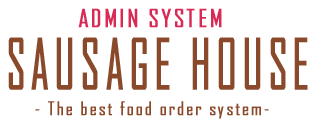
<style>
.page{position:relative;width:313px;height:130px;background:#ffffff}
.page>*{position:absolute;margin:0}
.t1{font:24px "AgencyFB-Reg";letter-spacing:0.1em;color:#d92a55;font-weight:bold}
.t2{font:67.2px "AgencyFB-Reg";letter-spacing:0.1em;color:#8a492b;font-weight:bold;scale:0.67 1}
.t3{font:18px "AgencyFB-Reg";letter-spacing:0.1em;color:#8a492b;font-weight:bold}
</style>
<div class="page">
<p class="t1" style="left:78px;top:8px;width:144px;height:20px">ADMIN SYSTEM</p>
<p class="t2" style="left:8px;top:37px;width:300px;height:53px">SAUSAGE HOUSE</p>
<p class="t3" style="left:35px;top:101px;width:234px;height:18px">- The best food order system-</p>
</div>
